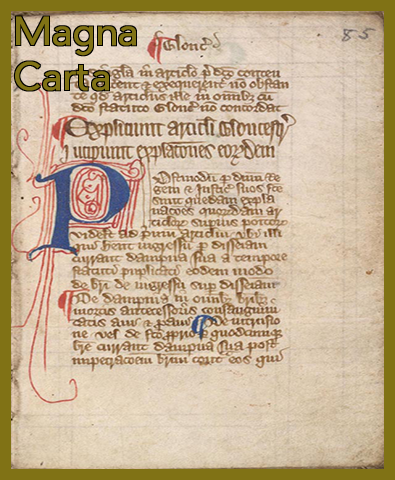
<style>
.page{position:relative;width:395px;height:480px}
.page>*{position:absolute;margin:0}
.t1{font:38px "PierSans";color:#807215}
</style>
<div class="page">
<p class="t1" style="left:15px;top:16px;width:121px;height:75px">Magna<br>Carta</p>
</div>
